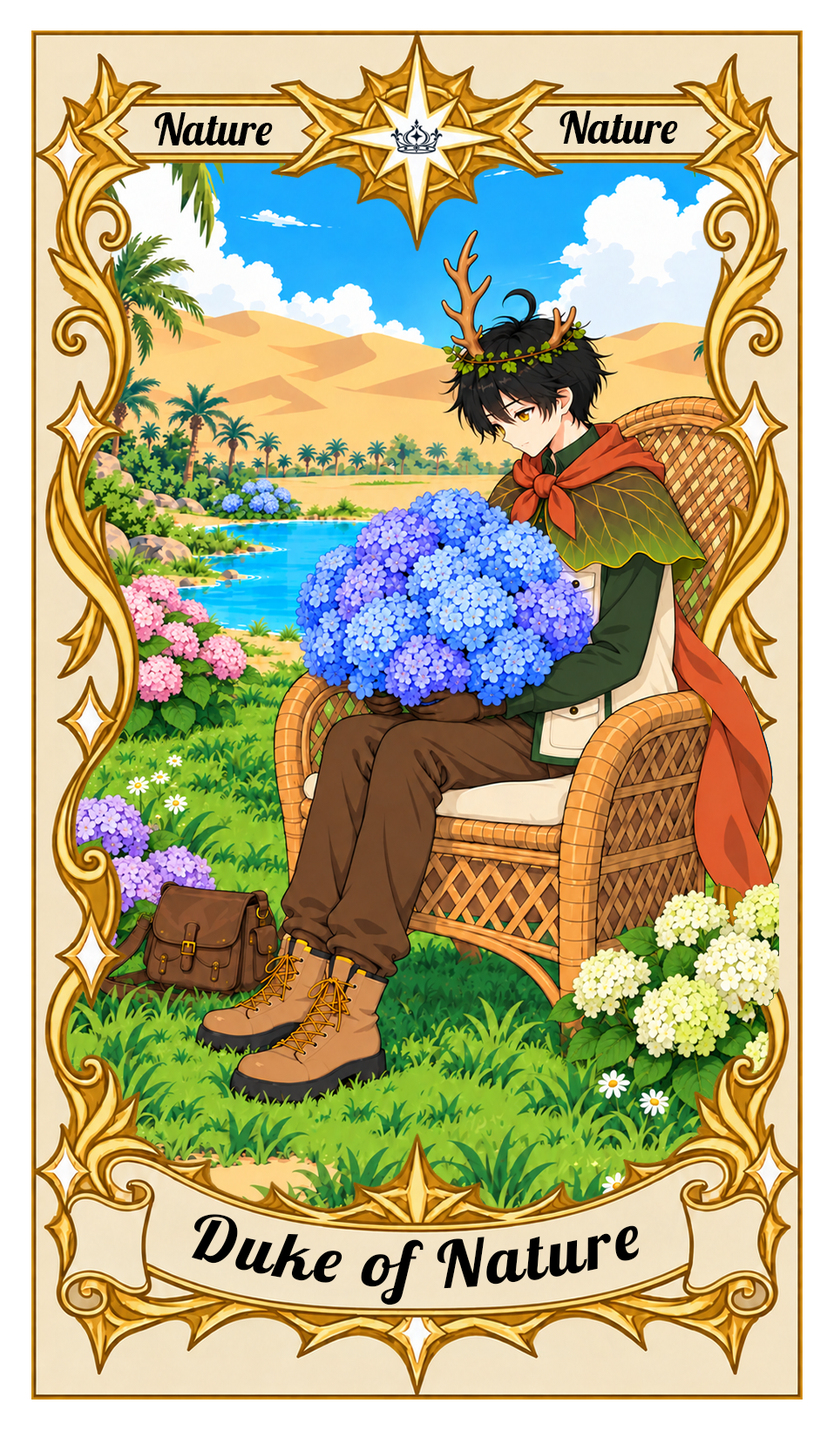
<style>
.page{position:relative;width:834px;height:1430px}
.page>*{position:absolute;margin:0}
.t1{font:43.6px "Lobster-Regular";color:#000000}
.t2{font:65.3px "Lobster-Regular";letter-spacing:0.05em;color:#000000}
</style>
<div class="page">
<p class="t1" style="left:154px;top:112px;width:119px;height:33px">Nature</p>
<p class="t1" style="left:559px;top:111px;width:119px;height:33px">Nature</p>
<p class="t2" style="left:192px;top:1214px;width:447px;height:92px">Duke of Nature</p>
</div>
